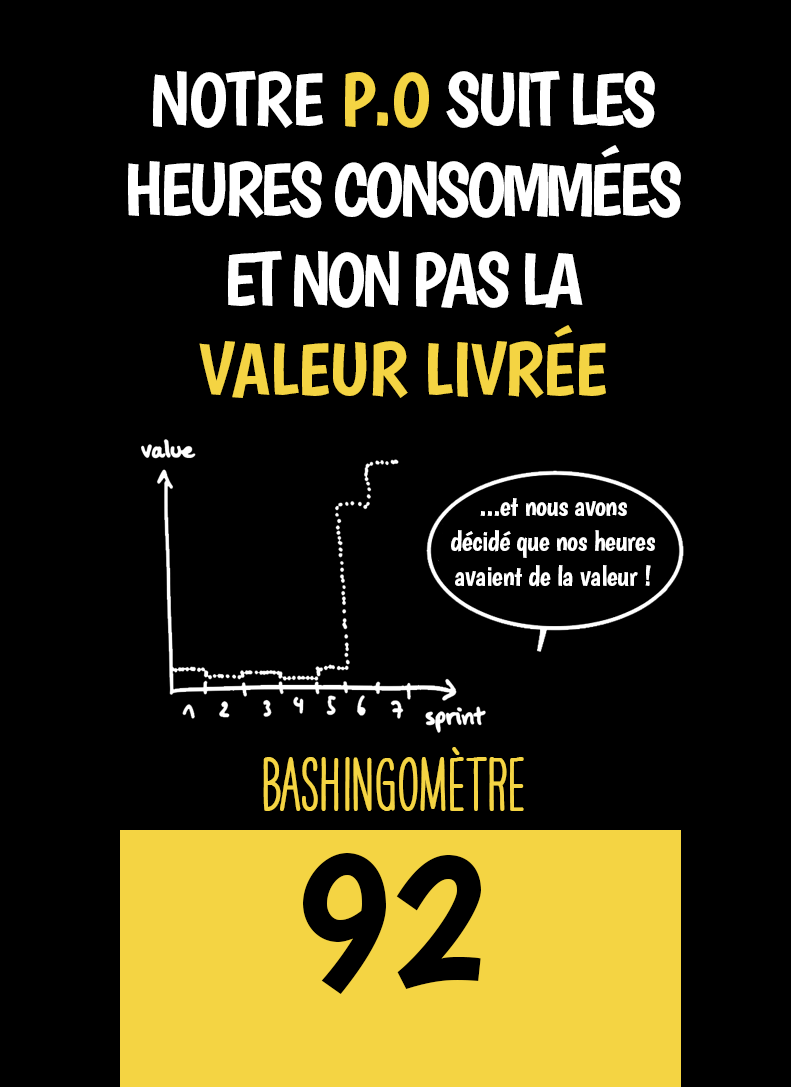
<style>
.page{position:relative;width:791px;height:1087px;background:#000000}
.page>*{position:absolute;margin:0}
.t1{font:75px "Boogaloo-Regular";letter-spacing:-0.06em;color:#ffffff}
.t2{font:75px "Boogaloo-Regular";letter-spacing:-0.02em;color:#ffffff}
.t3{font:75px "Boogaloo-Regular";letter-spacing:-0.02em;color:#f4d443}
.t4{font:29.2px "Boogaloo-Regular";letter-spacing:-0.02em;color:#ffffff}
.t5{font:66.7px "HAVEANICEDAYTallW04-Bold";color:#f4d443}
.t6{font:200px "Boogaloo-Regular";color:#000000}
</style>
<div class="page">
<p class="t1" style="left:128px;top:71px;width:553px;height:327px;text-align:center"><span class="t2">NOTRE </span><span class="t3">P.O </span>SUIT LES HEURES CONSOMMÉES ET NON PAS LA <span class="t3">VALEUR LIVRÉE</span></p>
<p class="t4" style="left:451px;top:498px;width:204px;height:89px;text-align:center">...et nous avons décidé que nos heures avaient de la valeur !</p>
<p class="t5" style="left:263px;top:747px;width:261px;height:64px">BASHINgomètre</p>
<p class="t6" style="left:303px;top:853px;width:178px;height:141px">92</p>
</div>
